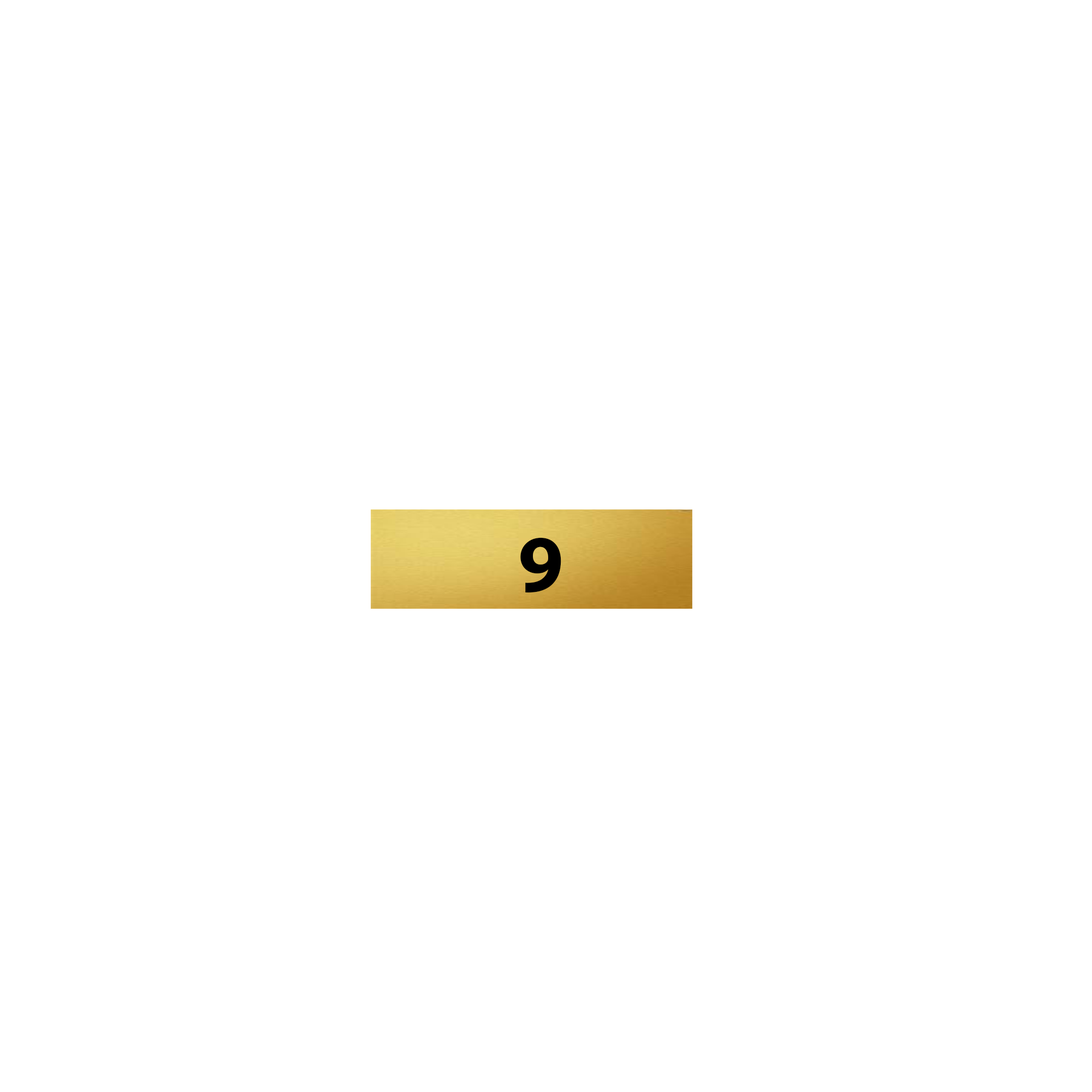
<style>
.page{position:relative;width:1092px;height:1092px;background:#ffffff}
.page>*{position:absolute;margin:0}
.t1{font:81.9px "MyriadPro-Bold";color:#000000}
</style>
<div class="page">
<p class="t1" style="left:520px;top:537px;width:41px;height:56px">9</p>
</div>
